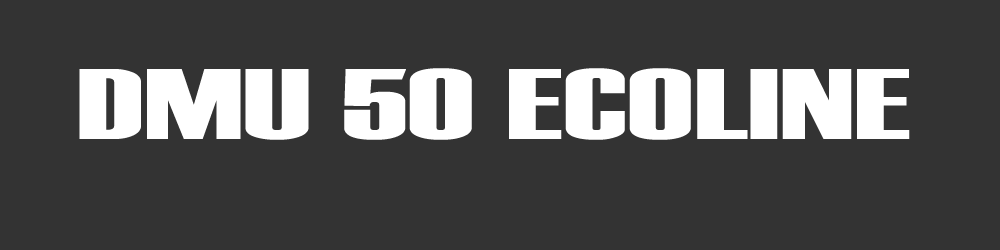
<style>
.page{position:relative;width:1000px;height:250px;background:#333333}
.page>*{position:absolute;margin:0}
.t1{font:100px "Haettenschweiler";color:#ffffff;scale:1.74 1}
</style>
<div class="page">
<p class="t1" style="left:79px;top:68px;width:831px;height:72px">DMU 50 ECOLINE</p>
</div>
